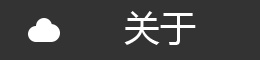
<style>
.page{position:relative;width:260px;height:60px;background:#333333}
.page>*{position:absolute;margin:0}
.t1{font:36px "MicrosoftYaHei";color:#ffffff}
</style>
<div class="page">
<p class="t1" style="left:124px;top:11px;width:72px;height:34px">关于</p>
</div>
